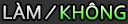
<style>
.page{position:relative;width:128px;height:24px;background:#333333}
.page>*{position:absolute;margin:0}
.t1{font:20px "Corbel";color:#dbdbdb}
.t2{font:20px "Corbel";color:#e6e6e6}
.t3{font:20px "Corbel"}
</style>
<div class="page">
<p class="t1" style="left:3px;top:2px;width:38px;height:17px">LÀM</p>
<p class="t2" style="left:45px;top:5px;width:11px;height:15px">⁄</p>
<p class="t3" style="left:60px;top:2px;width:66px;height:18px">KHÔNG</p>
</div>
